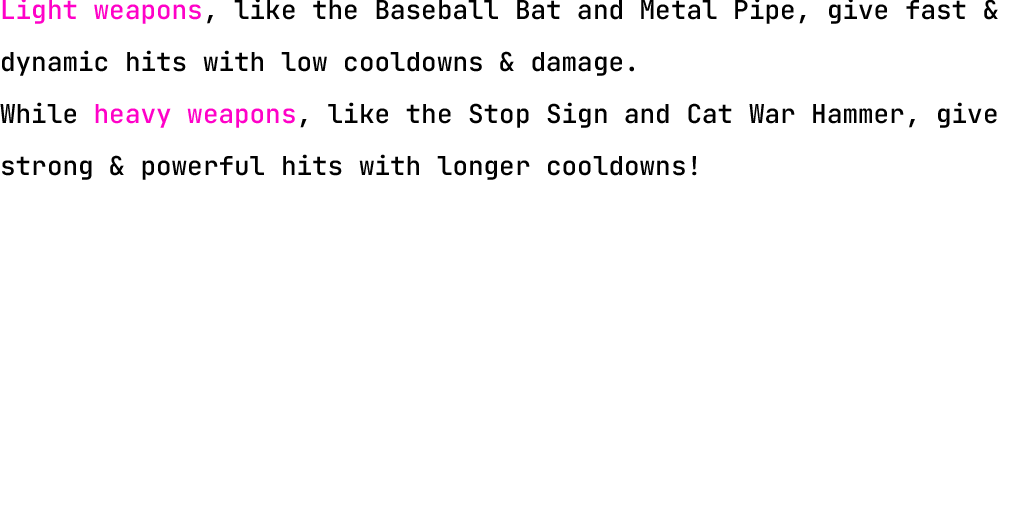
<style>
.page{position:relative;width:1024px;height:512px;background:#ffffff}
.page>*{position:absolute;margin:0}
.t1{font:26px/52px "JetBrainsMonoRoman-Medium";color:#000000}
.t2{font:26px/52px "JetBrainsMonoRoman-Medium";color:#ff01c8}
</style>
<div class="page">
<p class="t1" style="left:0px;top:0px;width:998px;height:180px"><span class="t2">Light weapons</span>, like the Baseball Bat and Metal Pipe, give fast &amp; dynamic hits with low cooldowns &amp; damage. <br>While <span class="t2">heavy weapons</span>, like the Stop Sign and Cat War Hammer, give strong &amp; powerful hits with longer cooldowns!</p>
</div>
